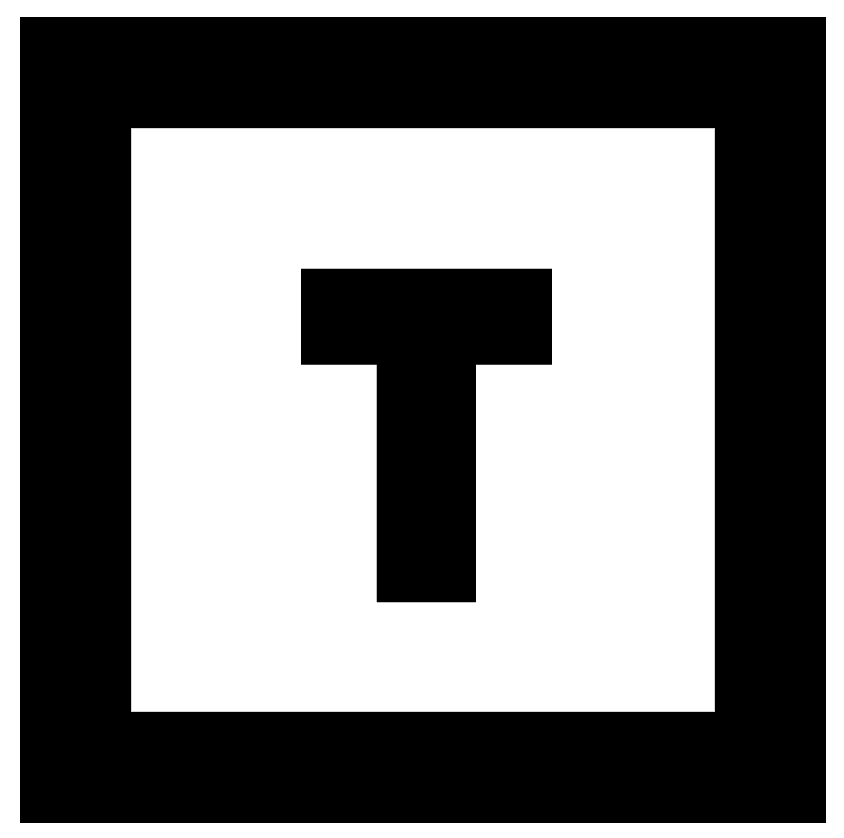
<style>
.page{position:relative;width:844px;height:838px;background:#000000}
.page>*{position:absolute;margin:0}
.t1{font:500px "Bauhaus93";letter-spacing:-0.02em;color:#000000}
</style>
<div class="page">
<p class="t1" style="left:301px;top:268px;width:251px;height:335px">T</p>
</div>
